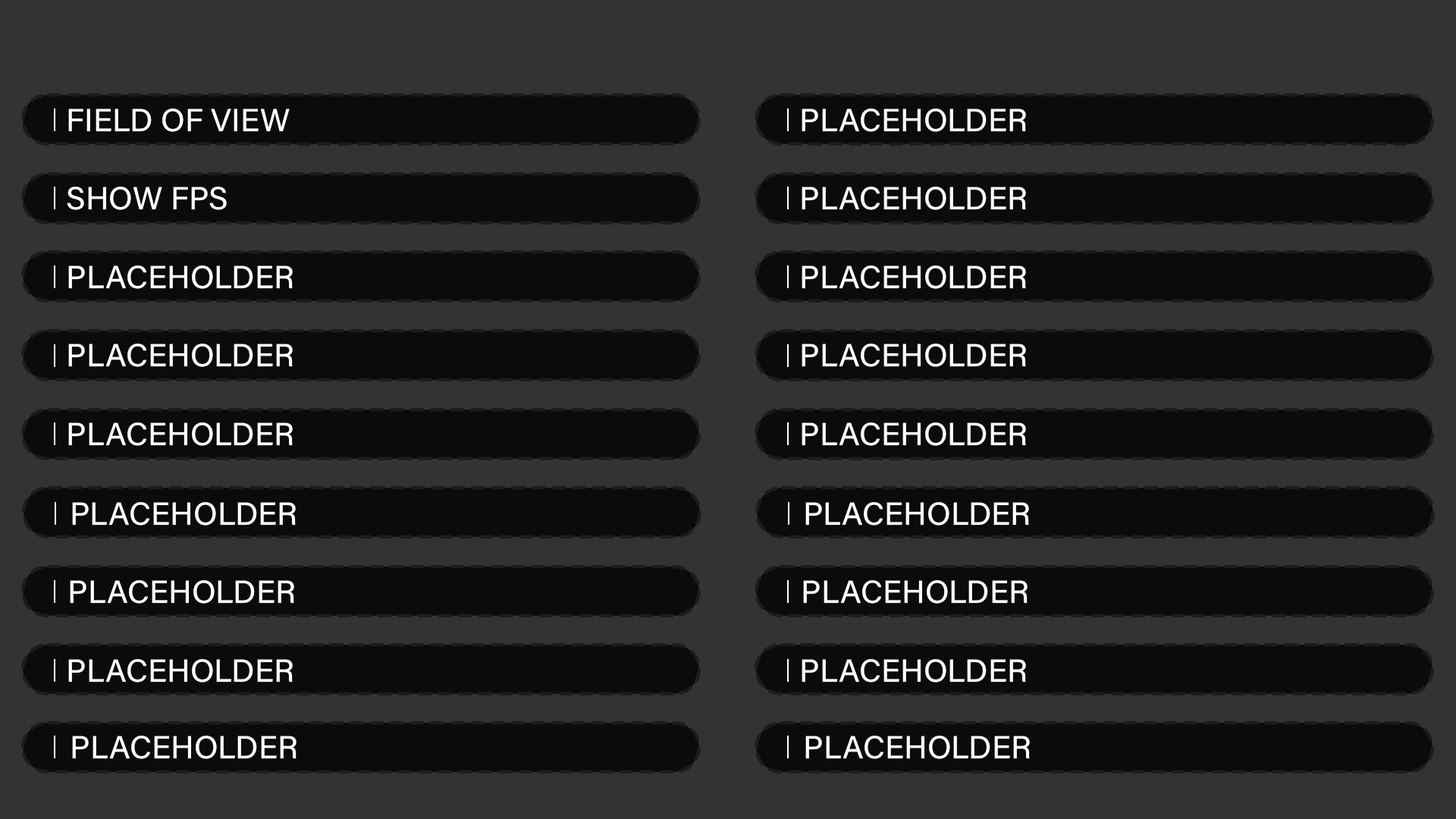
<style>
.page{position:relative;width:1456px;height:819px;background:#333333}
.page>*{position:absolute;margin:0}
.t1{font:31.9px "AcuminConcept-Regular";color:#ffffff;font-weight:bold}
</style>
<div class="page">
<p class="t1" style="left:68px;top:108px;width:222px;height:24px">FIELD OF VIEW</p>
<p class="t1" style="left:802px;top:108px;width:224px;height:24px">PLACEHOLDER</p>
<p class="t1" style="left:67px;top:187px;width:160px;height:23px">SHOW FPS</p>
<p class="t1" style="left:802px;top:187px;width:224px;height:23px">PLACEHOLDER</p>
<p class="t1" style="left:68px;top:265px;width:225px;height:24px">PLACEHOLDER</p>
<p class="t1" style="left:802px;top:265px;width:224px;height:24px">PLACEHOLDER</p>
<p class="t1" style="left:68px;top:344px;width:225px;height:23px">PLACEHOLDER</p>
<p class="t1" style="left:802px;top:344px;width:224px;height:23px">PLACEHOLDER</p>
<p class="t1" style="left:68px;top:422px;width:225px;height:24px">PLACEHOLDER</p>
<p class="t1" style="left:802px;top:422px;width:224px;height:24px">PLACEHOLDER</p>
<p class="t1" style="left:72px;top:502px;width:224px;height:24px">PLACEHOLDER</p>
<p class="t1" style="left:805px;top:502px;width:224px;height:24px">PLACEHOLDER</p>
<p class="t1" style="left:70px;top:580px;width:224px;height:24px">PLACEHOLDER</p>
<p class="t1" style="left:803px;top:580px;width:225px;height:24px">PLACEHOLDER</p>
<p class="t1" style="left:68px;top:659px;width:225px;height:23px">PLACEHOLDER</p>
<p class="t1" style="left:802px;top:659px;width:224px;height:23px">PLACEHOLDER</p>
<p class="t1" style="left:72px;top:736px;width:225px;height:23px">PLACEHOLDER</p>
<p class="t1" style="left:805px;top:736px;width:225px;height:23px">PLACEHOLDER</p>
</div>
